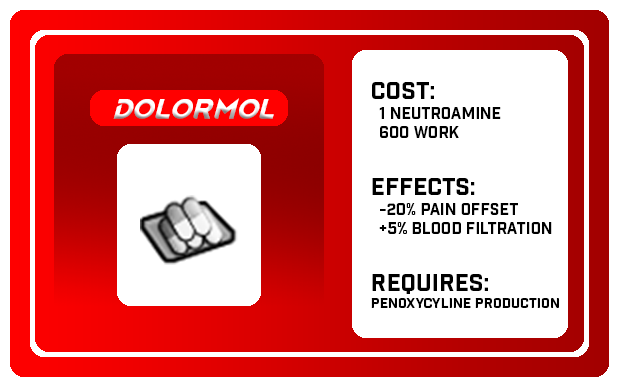
<style>
.page{position:relative;width:619px;height:387px;background:#ffffff}
.page>*{position:absolute;margin:0}
.t1{font:16px "IndustryInc-Base";color:#000000}
.t2{font:24px "IndustryInc-Base";color:#000000}
.t3{font:14px "IndustryInc-Base";color:#000000}
.t4{font:24.9px "RimWordFont";color:#ffffff;scale:0.96 1}
</style>
<div class="page">
<p class="t1" style="left:371px;top:82px;width:188px;height:226px"><span class="t2">Cost: <br></span>  1 Neutroamine<br>  600 Work<br><span class="t2"><br>Effects:<br></span>  -20% Pain Offset<br>  +5% Blood Filtration<br><span class="t2"><br>Requires:<br></span><span class="t3">Penoxycyline Production</span></p>
<p class="t4" style="left:113px;top:98px;width:161px;height:21px">Dolormol</p>
</div>
